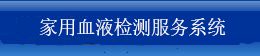
<style>
.page{position:relative;width:260px;height:56px;background:#003399}
.page>*{position:absolute;margin:0}
.t1{font:18.7px "SimSun";color:#fdfcfc}
</style>
<div class="page">
<p class="t1" style="left:39px;top:18px;width:187px;height:18px">家用血液检测服务系统</p>
</div>
